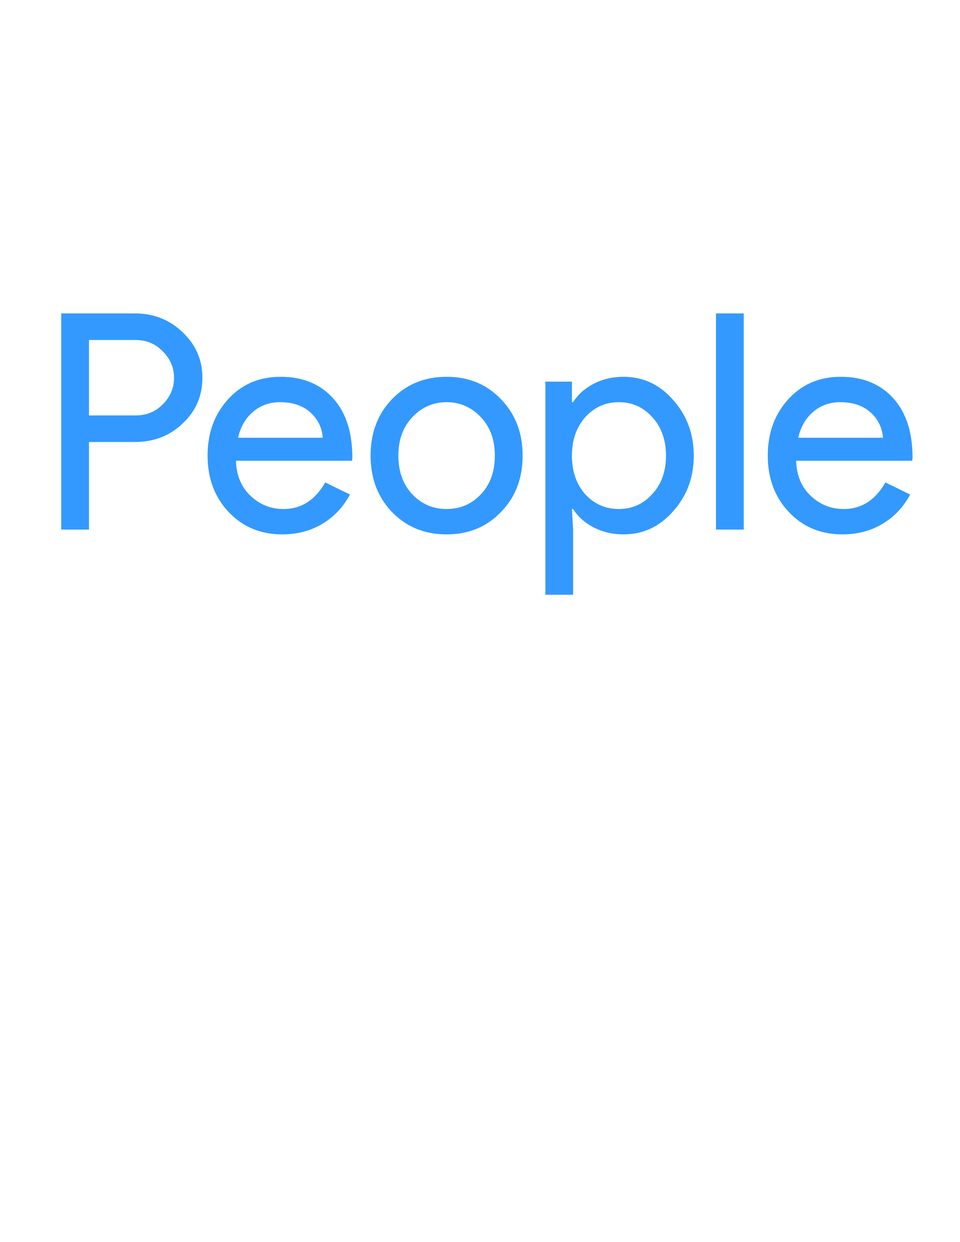
<style>
.page{position:relative;width:960px;height:1242px;background:#ffffff}
.page>*{position:absolute;margin:0}
.t1{font:301.9px "ProductSans-Regular";color:#3399ff}
</style>
<div class="page">
<p class="t1" style="left:61px;top:313px;width:851px;height:282px">People</p>
</div>
